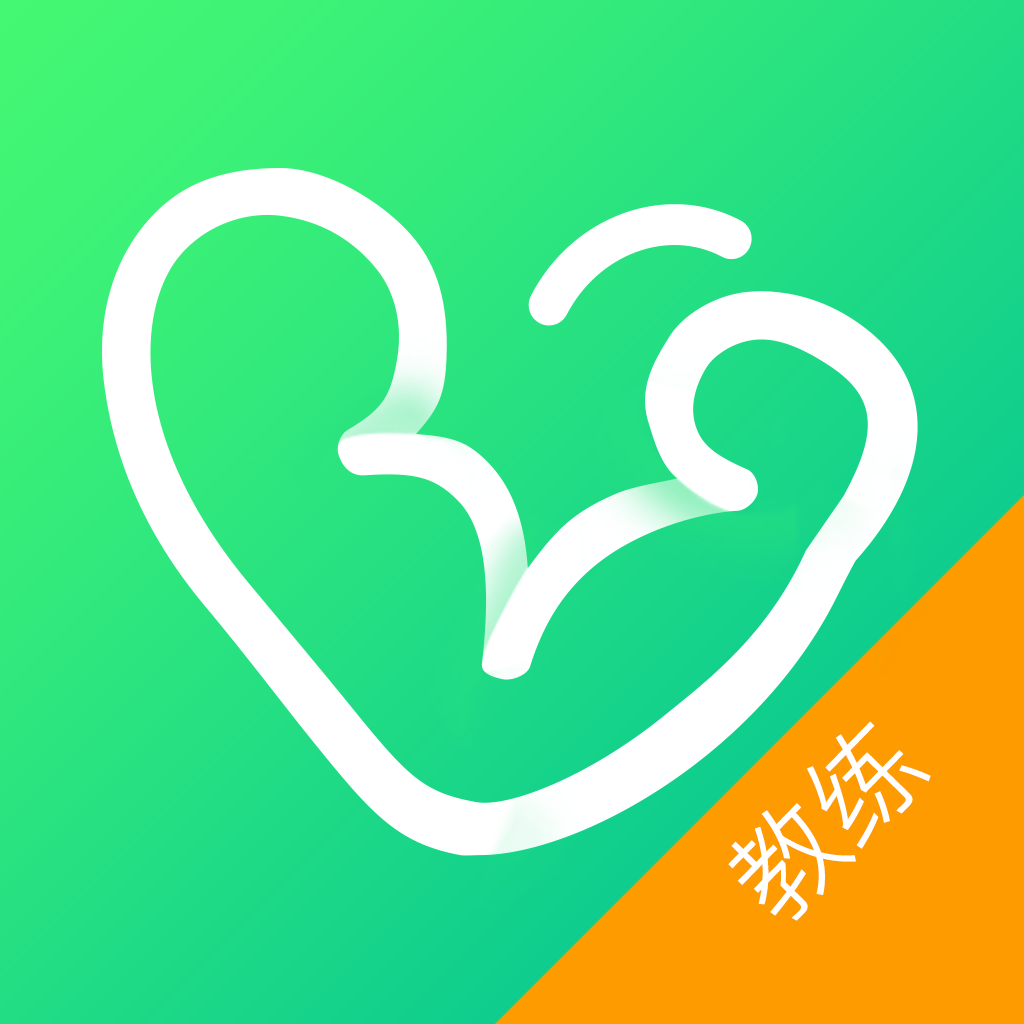
<style>
.page{position:relative;width:1024px;height:1024px}
.page>*{position:absolute;margin:0}
.t1{font:110px "PingFang-SC-Regular";color:#ffffff}
</style>
<div class="page">
<p class="t1" style="left:728px;top:721px;width:203px;height:200px;rotate:-46deg">教练</p>
</div>
